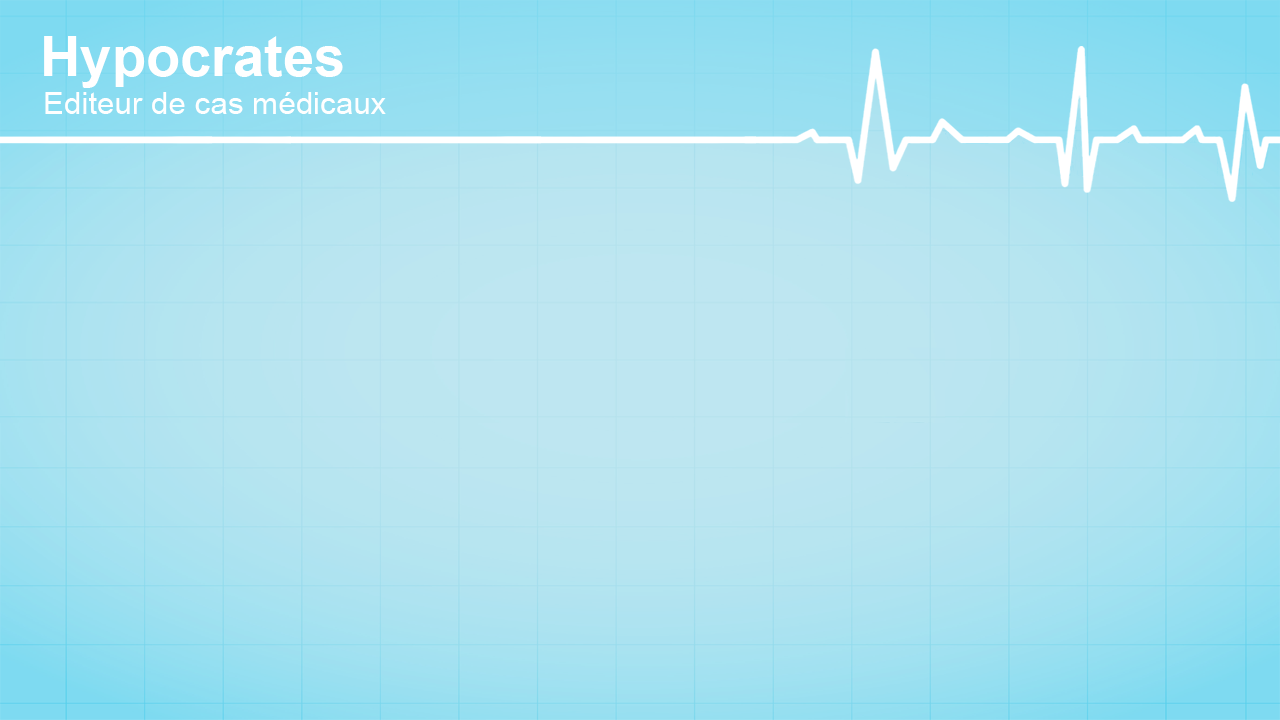
<style>
.page{position:relative;width:1280px;height:720px}
.page>*{position:absolute;margin:0}
.t1{font:56px "Arial-BoldMT";color:#ffffff}
.t2{font:31.4px "ArialMT";color:#ffffff}
</style>
<div class="page">
<p class="t1" style="left:44px;top:36px;width:299px;height:52px">Hypocrates</p>
<p class="t2" style="left:45px;top:92px;width:341px;height:22px">Editeur de cas médicaux</p>
</div>
